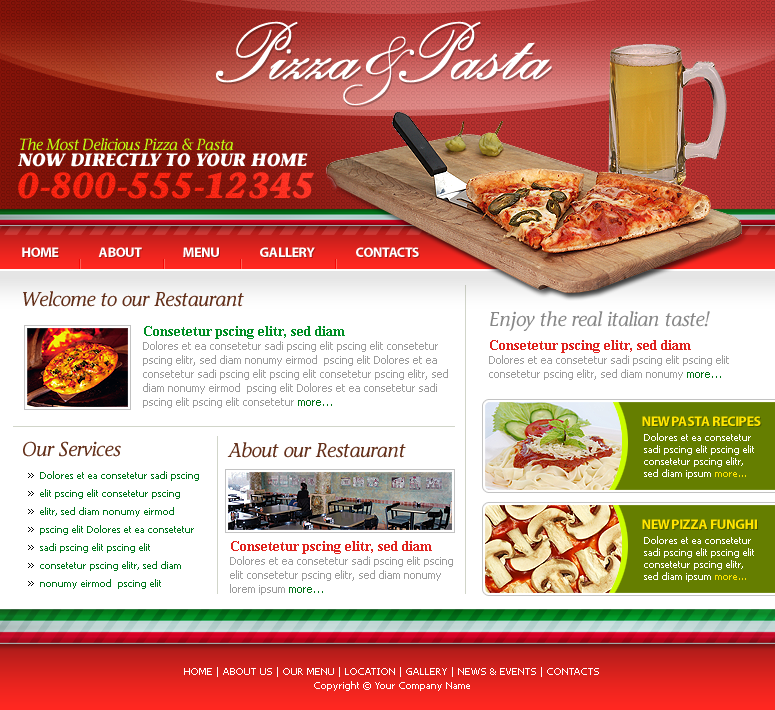
<style>
.page{position:relative;width:775px;height:710px;background:#ffffff}
.page>*{position:absolute;margin:0}
.t1{font:106px "PalaceScriptMTStd-SemiBold";color:#ffffff}
.t2{font:156px "PalaceScriptMTStd";color:#ffffff}
.t3{font:16px "StoneInformalStd-MediumItal";letter-spacing:-0.025em;color:#beff12}
.t4{font:18px "StoneInformalStd-BoldItalic";letter-spacing:-0.025em;color:#ffffff}
.t5{font:36px "StoneInformalStd-BoldItalic";letter-spacing:-0.025em;color:#ff2612}
.t6{font:14px "MyriadPro-Bold";letter-spacing:-0.025em;color:#ffffff;text-transform:uppercase}
.t7{font:20px "StoneInformalStd-MediumItal";letter-spacing:-0.025em;color:#632f19}
.t8{font:20px "StoneInformalStd-MediumItal";letter-spacing:-0.025em;color:#878787}
.t9{font:11px/14px "Tahoma";color:#9c9c9c}
.t10{font:14px/14px "TimesNewRomanPS-BoldMT";color:#008e24}
.t11{font:11px/14px "Tahoma";color:#027116}
.t12{font:14px/14px "TimesNewRomanPS-BoldMT";color:#e0231e}
.t13{font:14px "MyriadPro-Bold";letter-spacing:-0.025em;color:#ffe400;text-transform:uppercase}
.t14{font:10px/12px "Tahoma";color:#ffffff}
.t15{font:10px/12px "Tahoma";color:#ffe400}
.t16{font:10px/18px "Tahoma";color:#00761b}
.t17{font:10px/14px "Tahoma";color:#ffffff}
</style>
<div class="page">
<p class="t1" style="left:216px;top:21px;width:336px;height:62px">Pizza  Pasta</p>
<p class="t2" style="left:343px;top:36px;width:71px;height:69px">&amp;</p>
<p class="t3" style="left:20px;top:138px;width:214px;height:13px">The Most Delicious Pizza &amp; Pasta</p>
<p class="t4" style="left:18px;top:153px;width:290px;height:14px">NOW DIRECTLY TO YOUR HOME</p>
<p class="t5" style="left:18px;top:172px;width:296px;height:27px">0-800-555-12345</p>
<p class="t6" style="left:22px;top:247px;width:37px;height:10px">HOME</p>
<p class="t6" style="left:98px;top:247px;width:44px;height:10px">about</p>
<p class="t6" style="left:183px;top:247px;width:36px;height:10px">menu</p>
<p class="t6" style="left:260px;top:247px;width:55px;height:10px">gallery</p>
<p class="t6" style="left:356px;top:247px;width:63px;height:10px">contacts</p>
<p class="t7" style="left:23px;top:291px;width:221px;height:16px">Welcome to our Restaurant</p>
<p class="t8" style="left:490px;top:311px;width:220px;height:20px">Enjoy the real italian taste!</p>
<p class="t9" style="left:143px;top:326px;width:305px;height:82px"><span class="t10">Consetetur pscing elitr, sed diam <br></span>Dolores et ea consetetur sadi pscing elit pscing elit consetetur pscing elitr, sed diam nonumy eirmod  pscing elit Dolores et ea consetetur sadi pscing elit pscing elit consetetur pscing elitr, sed diam nonumy eirmod  pscing elit Dolores et ea consetetur sadi pscing elit pscing elit consetetur <span class="t11">more...</span></p>
<p class="t9" style="left:489px;top:340px;width:240px;height:40px"><span class="t12">Consetetur pscing elitr, sed diam <br></span>Dolores et ea consetetur sadi pscing elit pscing elit consetetur pscing elitr, sed diam nonumy <span class="t11">more...</span></p>
<p class="t13" style="left:642px;top:416px;width:119px;height:10px">New paSTA RECIPES</p>
<p class="t14" style="left:644px;top:433px;width:110px;height:46px">Dolores et ea consetetur sadi pscing elit pscing elit consetetur pscing elitr, sed diam ipsum <span class="t15">more...</span></p>
<p class="t7" style="left:23px;top:441px;width:98px;height:16px">Our Services</p>
<p class="t7" style="left:227px;top:442px;width:179px;height:16px">About our Restaurant</p>
<p class="t16" style="left:40px;top:471px;width:159px;height:118px">Dolores et ea consetetur sadi pscing elit pscing elit consetetur pscing elitr, sed diam nonumy eirmod  pscing elit Dolores et ea consetetur sadi pscing elit pscing elit consetetur pscing elitr, sed diam nonumy eirmod  pscing elit</p>
<p class="t13" style="left:642px;top:519px;width:115px;height:10px">NEW PIZZA FUNGHI</p>
<p class="t9" style="left:230px;top:541px;width:223px;height:54px"><span class="t12">Consetetur pscing elitr, sed diam <br></span>Dolores et ea consetetur sadi pscing elit pscing elit consetetur pscing elitr, sed diam nonumy lorem ipsum <span class="t11">more...</span></p>
<p class="t14" style="left:644px;top:536px;width:110px;height:46px">Dolores et ea consetetur sadi pscing elit pscing elit consetetur pscing elitr, sed diam ipsum <span class="t15">more...</span></p>
<p class="t17" style="left:184px;top:667px;width:415px;height:24px;text-align:center">HOME | ABOUT US | OUR MENU | LOCATION | GALLERY | NEWS &amp; EVENTS | CONTACTS<br>Copyright © Your Company Name</p>
</div>
